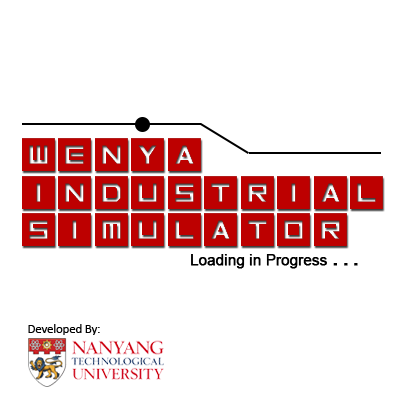
<style>
.page{position:relative;width:400px;height:400px;background:#ffffff}
.page>*{position:absolute;margin:0}
.t1{font:58.3px/37.5px "Inversionz";color:#bd0000}
.t2{font:14.6px "ArialMT";color:#000000;font-weight:bold}
.t3{font:25px "ArialMT";letter-spacing:-0.1em;color:#000000;font-weight:bold}
.t4{font:12.5px "Calibri";color:#000000}
</style>
<div class="page">
<p class="t1" style="left:22px;top:138px;width:361px;height:108px">wenya<br>industrial<br>simulator</p>
<p class="t2" style="left:191px;top:254px;width:167px;height:15px">Loading in Progress <span class="t3">. . .</span></p>
<p class="t4" style="left:28px;top:324px;width:72px;height:11px">Developed By:</p>
</div>
